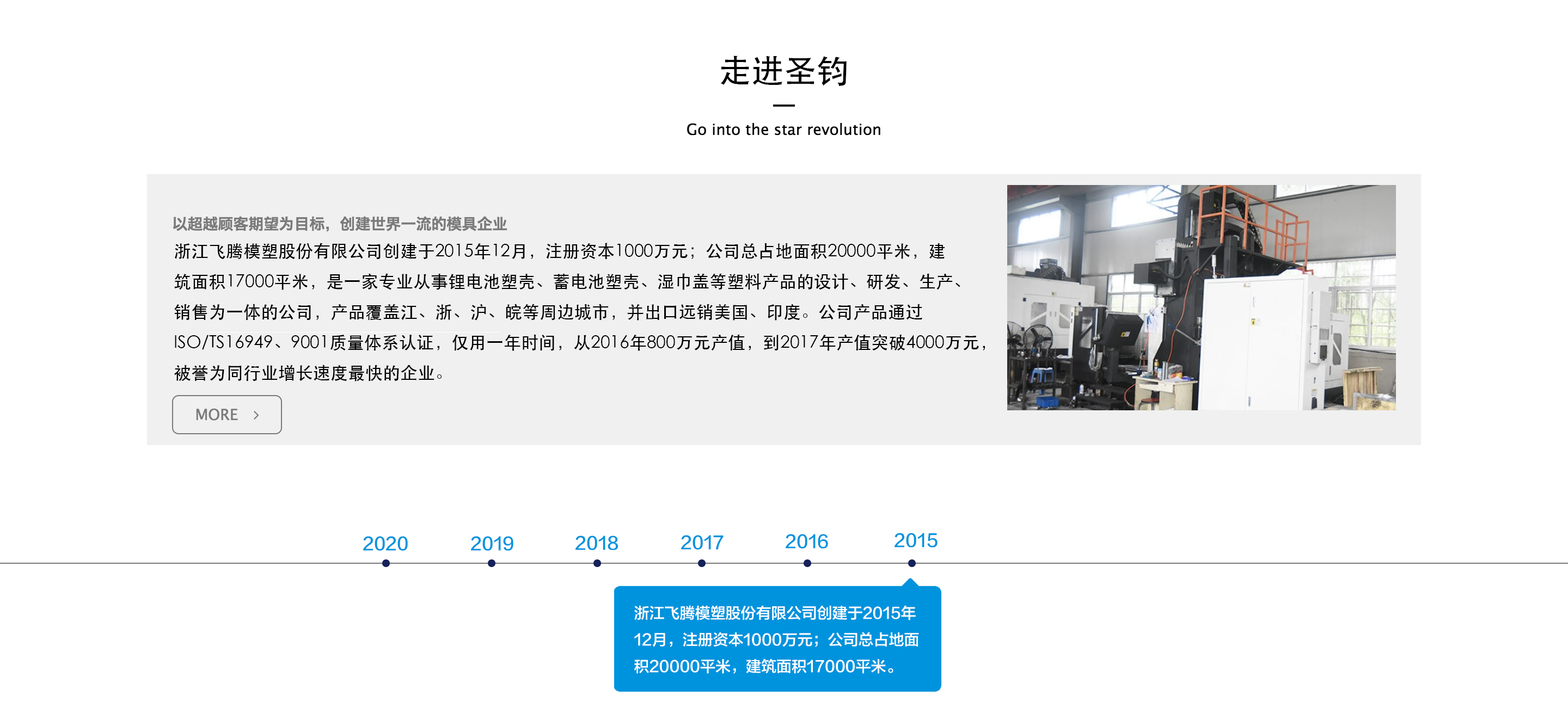
<style>
.page{position:relative;width:1568px;height:702px;background:#ffffff}
.page>*{position:absolute;margin:0}
.t1{font:32.7px "STHeiti";color:#000000}
.t2{font:17.4px "STHeiti";color:#000000}
.t3{font:17.4px "FZLTZHK--GBK1-0";color:#0093dd}
.t4{font:15.2px "FZLTZHK--GBK1-0";color:#ffffff}
</style>
<div class="page">
<p class="t1" style="left:720px;top:56px;width:127px;height:30px">走进圣钧</p>
<p class="t2" style="left:174px;top:243px;width:811px;height:139px">浙江飞腾模塑股份有限公司创建于2015年12月，注册资本1000万元；公司总占地面积20000平米，建<br>筑面积17000平米，是一家专业从事锂电池塑壳、蓄电池塑壳、湿巾盖等塑料产品的设计、研发、生产、<br>销售为一体的公司，产品覆盖江、浙、沪、皖等周边城市，并出口远销美国、印度。公司产品通过<br>ISO/TS16949、9001质量体系认证，仅用一年时间，从2016年800万元产值，到2017年产值突破4000万元，<br>被誉为同行业增长速度最快的企业。</p>
<p class="t3" style="left:895px;top:533px;width:43px;height:15px">2015</p>
<p class="t3" style="left:363px;top:536px;width:45px;height:15px">2020</p>
<p class="t3" style="left:471px;top:536px;width:42px;height:15px">2019</p>
<p class="t3" style="left:575px;top:536px;width:43px;height:14px">2018</p>
<p class="t3" style="left:681px;top:535px;width:43px;height:15px">2017</p>
<p class="t3" style="left:786px;top:534px;width:42px;height:15px">2016</p>
<p class="t4" style="left:634px;top:605px;width:285px;height:69px">浙江飞腾模塑股份有限公司创建于2015年<br>12月，注册资本1000万元；公司总占地面<br>积20000平米，建筑面积17000平米。</p>
</div>
